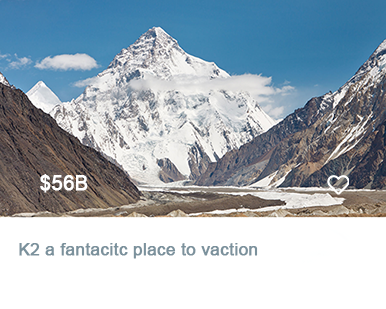
<style>
.page{position:relative;width:386px;height:309px;background:#ffffff}
.page>*{position:absolute;margin:0}
.t1{font:20px "ArialMT";color:#ffffff;font-weight:bold}
.t2{font:17px "ArialMT";color:#7b919c;font-weight:bold}
</style>
<div class="page">
<p class="t1" style="left:40px;top:174px;width:48px;height:19px">$56B</p>
<p class="t2" style="left:19px;top:243px;width:239px;height:16px">K2 a fantacitc place to vaction</p>
</div>
